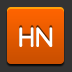
<style>
.page{position:relative;width:72px;height:72px;background:#333333}
.page>*{position:absolute;margin:0}
.t1{font:25px "Comfortaa-Bold";letter-spacing:0.05em;color:#ffffff}
</style>
<div class="page">
<p class="t1" style="left:19px;top:27px;width:34px;height:20px">HN</p>
</div>
